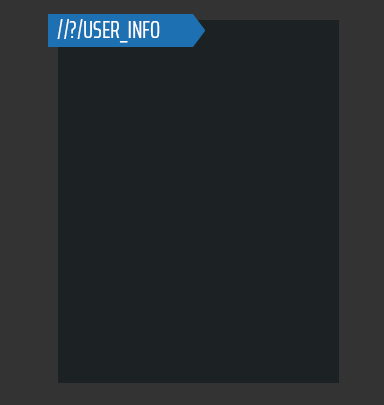
<style>
.page{position:relative;width:384px;height:405px;background:#1c2224}
.page>*{position:absolute;margin:0}
.t1{font:24px "SairaExtraCondensed-Regular";color:#ffffff}
</style>
<div class="page">
<p class="t1" style="left:57px;top:19px;width:103px;height:24px">//?/USER_INFO</p>
</div>
